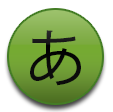
<style>
.page{position:relative;width:113px;height:112px;background:#ffffff}
.page>*{position:absolute;margin:0}
.t1{font:61.6px "KozGoPr6N-Regular";color:#000000}
</style>
<div class="page">
<p class="t1" style="left:30px;top:30px;width:51px;height:56px">あ</p>
</div>
